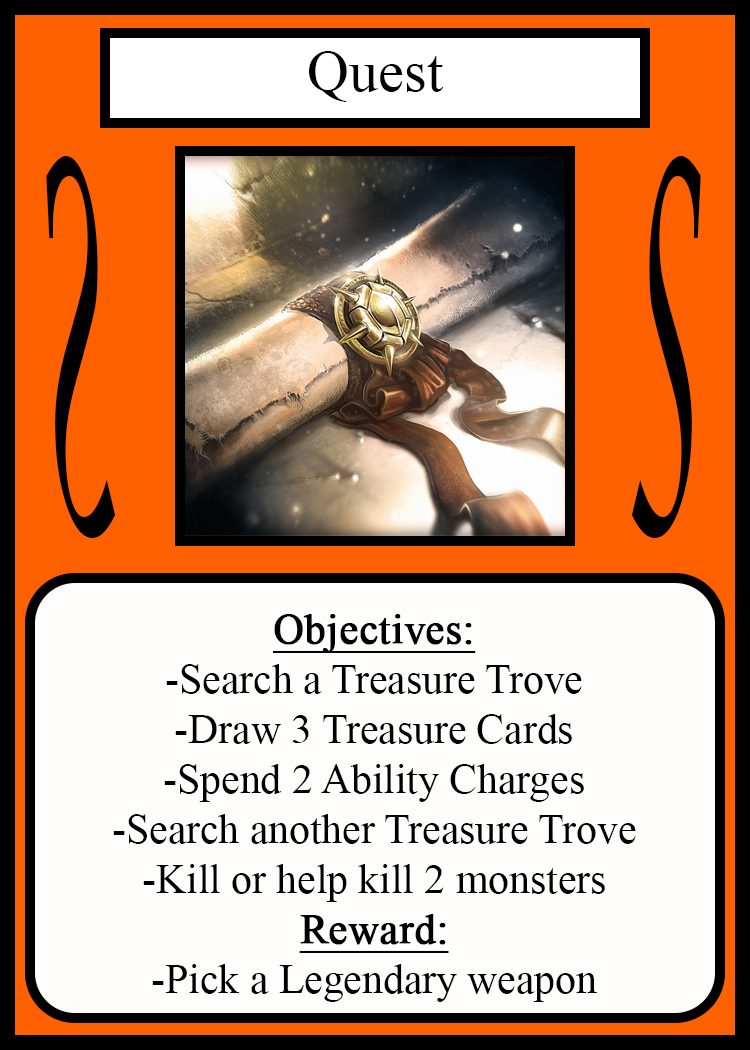
<style>
.page{position:relative;width:750px;height:1050px;background:#fffcfc}
.page>*{position:absolute;margin:0}
.t1{font:58.3px "TimesNewRomanPSMT";color:#010101}
.t2{font:504.3px "LucidaCalligraphy-Italic";color:#000000;scale:0.24 1}
.t3{font:504.1px "LucidaCalligraphy-Italic";color:#000000;scale:0.24 1}
.t4{font:41.7px "TimesNewRomanPSMT";color:#000000}
.t5{font:41.7px "TimesNewRomanPSMT";color:#000000;font-weight:bold;text-decoration:underline}
</style>
<div class="page">
<p class="t1" style="left:309px;top:51px;width:135px;height:51px">Quest</p>
<p class="t2" style="left:46px;top:156px;width:70px;height:382px;rotate:180deg">S</p>
<p class="t3" style="left:631px;top:156px;width:70px;height:382px">S</p>
<p class="t4" style="left:113px;top:614px;width:523px;height:388px;text-align:center"><span class="t5">Objectives:<br></span>-Search a Treasure Trove<br>-Draw 3 Treasure Cards<br>-Spend 2 Ability Charges<br>-Search another Treasure Trove<br>-Kill or help kill 2 monsters<br><span class="t5">Reward:</span><br>-Pick a Legendary weapon</p>
</div>
